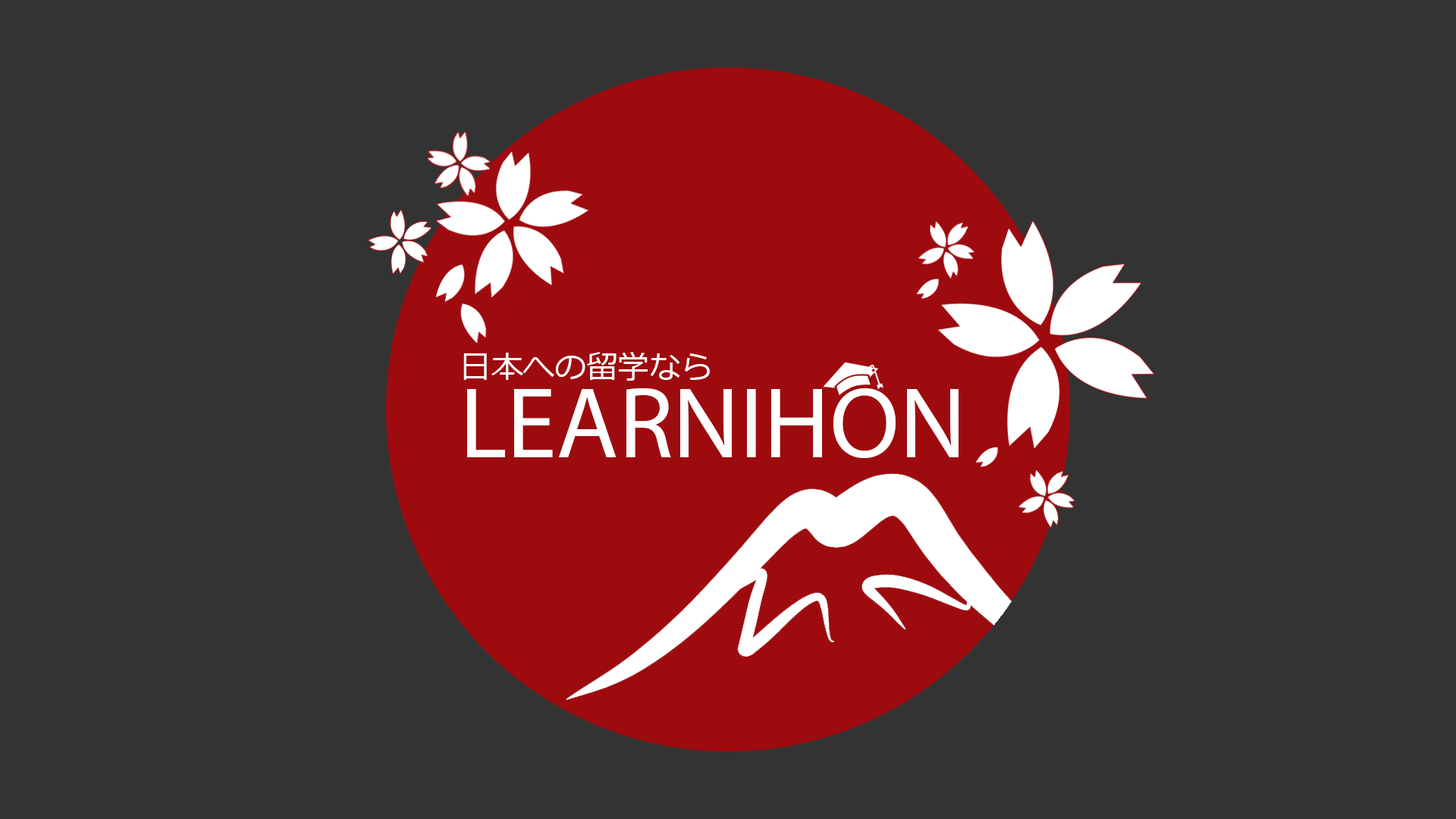
<style>
.page{position:relative;width:1456px;height:819px;background:#333333}
.page>*{position:absolute;margin:0}
.t1{font:31.6px "Meiryo";color:#ffffff}
.t2{font:101.1px "MyriadPro-Regular";color:#ffffff}
</style>
<div class="page">
<p class="t1" style="left:463px;top:352px;width:247px;height:29px">日本への留学なら</p>
<p class="t2" style="left:467px;top:388px;width:492px;height:71px">LEARNIHON</p>
</div>
